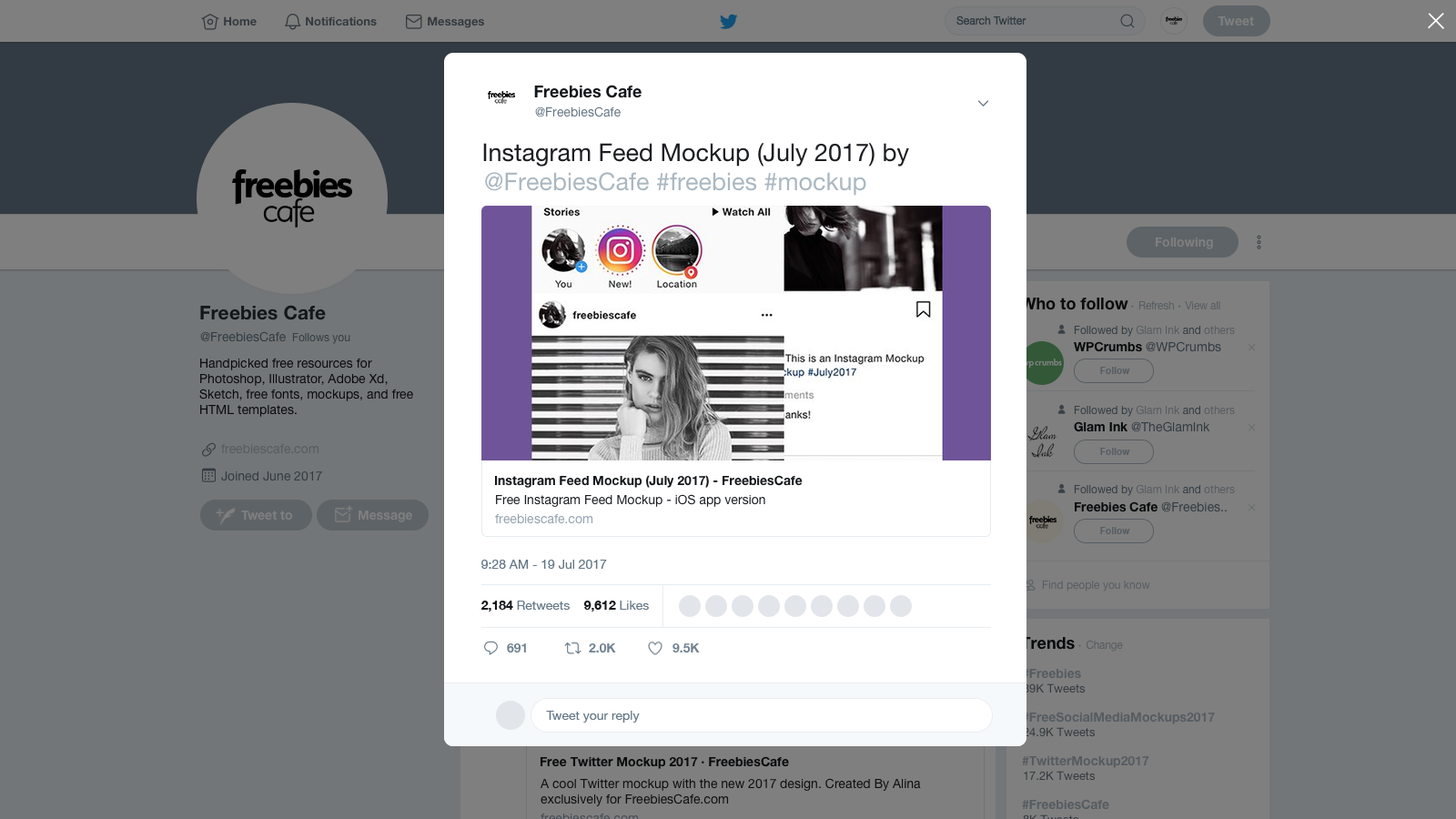
<style>
.page{position:relative;width:1456px;height:819px;background:#737678}
.page>*{position:absolute;margin:0}
.t1{font:11.8px "HelveticaNeue-Bold";letter-spacing:0.001em;color:#333a3f}
.t2{font:12.7px "HelveticaNeue-Bold";letter-spacing:0.001em;color:#7f7f7f}
.t3{font:16.4px/12.7px "HelveticaNeue-Bold";color:#14171a}
.t4{font:12.7px/12.7px "HelveticaNeue";color:#657786}
.t5{font:24.6px/29.1px "HelveticaNeue";color:#1c1e22}
.t6{font:24.6px/29.1px "HelveticaNeue";color:#abb8c2}
.t7{font:19.1px "HelveticaNeue-Bold";color:#141719}
.t8{font:16.4px "HelveticaNeue-Bold";color:#14171a}
.t9{font:9.1px "HelveticaNeue";letter-spacing:-0.02em;color:#abb8c2}
.t10{font:10.9px "HelveticaNeue";letter-spacing:-0.02em;color:#abb8c2}
.t11{font:10.9px "HelveticaNeue"}
.t12{font:12.7px "HelveticaNeue";letter-spacing:0.001em;color:#323b43}
.t13{font:10.9px "HelveticaNeue";letter-spacing:0.001em;color:#323b43}
.t14{font:12.7px "HelveticaNeue";color:#657786}
.t15{font:12.7px "HelveticaNeue-Bold";color:#14171a}
.t16{font:12.7px/15.5px "HelveticaNeue";letter-spacing:0.001em;color:#14171a}
.t17{font:9.7px "HelveticaNeue-Bold";letter-spacing:0.001em;color:#555c62}
.t18{font:12.7px "HelveticaNeue"}
.t19{font:12.7px "HelveticaNeue-Bold"}
.t20{font:12.7px/19.1px "HelveticaNeue";letter-spacing:0.001em}
.t21{font:12.7px/12.7px "HelveticaNeue-Bold";color:#14171a}
.t22{font:12.7px/12.7px "HelveticaNeue";color:#1c1e22}
.t23{font:12.7px/12.7px "HelveticaNeue";color:#93a3af}
.t24{font:12.7px/12.7px "HelveticaNeue";color:#abb8c2}
.t25{font:10.9px "HelveticaNeue";color:#555c62}
.t26{font:12.7px "HelveticaNeue-Bold";color:#14181c}
.t27{font:12.7px "HelveticaNeue-Bold";color:#708291}
</style>
<div class="page">
<p class="t1" style="left:224px;top:16px;width:33px;height:10px">Home</p>
<p class="t1" style="left:306px;top:16px;width:71px;height:10px">Notifications</p>
<p class="t1" style="left:428px;top:16px;width:56px;height:12px">Messages</p>
<p class="t2" style="left:1218px;top:16px;width:36px;height:10px">Tweet</p>
<p class="t3" style="left:534px;top:85px;width:108px;height:32px">Freebies Cafe <br><span class="t4">@FreebiesCafe</span></p>
<p class="t5" style="left:483px;top:143px;width:426px;height:53px">Instagram Feed Mockup (July 2017) by <span class="t6">@FreebiesCafe #freebies #mockup</span></p>
<p class="t2" style="left:1156px;top:238px;width:57px;height:11px">Following</p>
<p class="t7" style="left:200px;top:305px;width:126px;height:15px">Freebies Cafe</p>
<p class="t8" style="left:1020px;top:298px;width:200px;height:12px">Who to follow <span class="t9">•  </span><span class="t10">Refresh </span><span class="t9">•  </span><span class="t10">View all</span></p>
<p class="t11" style="left:1074px;top:325px;width:161px;height:12px">Followed by Glam Ink and others</p>
<p class="t12" style="left:200px;top:331px;width:150px;height:13px">@FreebiesCafe  <span class="t13">Follows you</span></p>
<p class="t14" style="left:1074px;top:341px;width:147px;height:11px"><span class="t15">WPCrumbs </span>@WPCrumbs</p>
<p class="t16" style="left:199px;top:358px;width:214px;height:59px">Handpicked free resources for Photoshop, Illustrator, Adobe Xd, Sketch, free fonts, mockups, and free HTML templates.</p>
<p class="t17" style="left:1100px;top:367px;width:30px;height:7px">Follow</p>
<p class="t11" style="left:1074px;top:405px;width:161px;height:12px">Followed by Glam Ink and others</p>
<p class="t18" style="left:1074px;top:421px;width:136px;height:11px"><span class="t19">Glam Ink </span>@TheGlamInk</p>
<p class="t20" style="left:221px;top:443px;width:101px;height:38px">freebiescafe.com<br>Joined June 2017</p>
<p class="t17" style="left:1100px;top:448px;width:30px;height:7px">Follow</p>
<p class="t21" style="left:495px;top:475px;width:308px;height:49px">Instagram Feed Mockup (July 2017) - FreebiesCafe<br><span class="t22">Free Instagram Feed Mockup - iOS app version <br></span><span class="t23">freebiescafe.com<br></span><span class="t24">#mockup #2017</span></p>
<p class="t11" style="left:1074px;top:484px;width:161px;height:12px">Followed by Glam Ink and others</p>
<p class="t15" style="left:1075px;top:501px;width:152px;height:11px">Freebies Cafe <span class="t14">@Freebies..</span></p>
<p class="t2" style="left:241px;top:511px;width:51px;height:10px">Tweet to</p>
<p class="t2" style="left:359px;top:511px;width:53px;height:11px">Message</p>
<p class="t17" style="left:1100px;top:527px;width:30px;height:7px">Follow</p>
<p class="t14" style="left:481px;top:560px;width:126px;height:9px">9:28 AM - 19 Jul 2017</p>
<p class="t25" style="left:1042px;top:581px;width:108px;height:10px">Find people you know</p>
<p class="t14" style="left:480px;top:601px;width:169px;height:11px"><span class="t26">2,184</span> Retweets    <span class="t26">9,612</span> Likes</p>
<p class="t8" style="left:1020px;top:637px;width:103px;height:15px">Trends <span class="t9">•  </span><span class="t10">Change</span></p>
<p class="t27" style="left:507px;top:643px;width:19px;height:10px">691</p>
<p class="t27" style="left:589px;top:643px;width:27px;height:10px">2.0K</p>
<p class="t27" style="left:672px;top:643px;width:28px;height:10px">9.5K</p>
<p class="t14" style="left:546px;top:711px;width:94px;height:12px">Tweet your reply</p>
</div>
